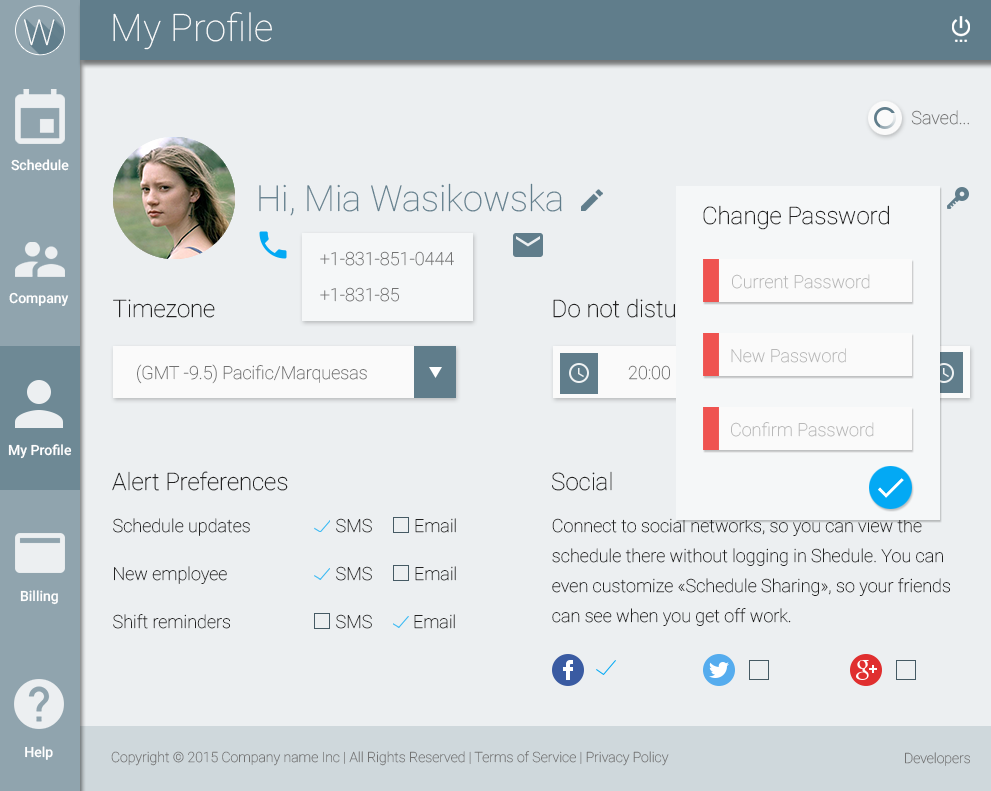
<style>
.page{position:relative;width:991px;height:791px;background:#eceff1}
.page>*{position:absolute;margin:0}
.t1{font:38px "Roboto-Thin";color:#ffffff}
.t2{font:35.7px "Roboto-Thin";color:#ffffff}
.t3{font:18px "Roboto-Thin";color:#727272}
.t4{font:14px "Roboto-Medium";color:#ffffff}
.t5{font:36px "Roboto-Thin";color:#607d8b}
.t6{font:24px "Roboto-Thin";color:#222222}
.t7{font:18px "Roboto-Thin";color:#b8b8b8}
.t8{font:18px/24px "Roboto-Thin";color:#222222}
.t9{font:18px "Roboto-Thin";color:#222222}
.t10{font:18px/30px "Roboto-Thin";color:#222222}
.t11{font:14px "Roboto-Thin";color:#727272}
</style>
<div class="page">
<p class="t1" style="left:113px;top:11px;width:159px;height:39px">My Profile</p>
<p class="t2" style="left:24px;top:19px;width:31px;height:27px">W</p>
<p class="t3" style="left:911px;top:110px;width:58px;height:15px">Saved...</p>
<p class="t4" style="left:11px;top:159px;width:58px;height:12px">Schedule</p>
<p class="t5" style="left:259px;top:183px;width:303px;height:33px">Hi, Mia Wasikowska</p>
<p class="t6" style="left:703px;top:205px;width:186px;height:25px">Change Password</p>
<p class="t3" style="left:320px;top:251px;width:134px;height:15px">+1-831-851-0444</p>
<p class="t7" style="left:732px;top:274px;width:138px;height:15px">Current Password</p>
<p class="t4" style="left:9px;top:292px;width:60px;height:14px">Company</p>
<p class="t3" style="left:320px;top:287px;width:79px;height:15px">+1-831-85</p>
<p class="t6" style="left:113px;top:299px;width:102px;height:19px">Timezone</p>
<p class="t6" style="left:553px;top:298px;width:184px;height:20px">Do not disturb me</p>
<p class="t7" style="left:731px;top:348px;width:115px;height:15px">New Password</p>
<p class="t3" style="left:137px;top:364px;width:230px;height:20px">(GMT -9.5) Pacific/Marquesas</p>
<p class="t3" style="left:628px;top:365px;width:42px;height:15px">20:00</p>
<p class="t7" style="left:731px;top:422px;width:143px;height:15px">Confirm Password</p>
<p class="t4" style="left:8px;top:444px;width:64px;height:15px">My Profile</p>
<p class="t6" style="left:112px;top:471px;width:176px;height:20px">Alert Preferences</p>
<p class="t6" style="left:552px;top:471px;width:60px;height:20px">Social</p>
<p class="t8" style="left:113px;top:518px;width:137px;height:111px">Schedule updates<br><br>New employee<br><br>Shift reminders</p>
<p class="t9" style="left:336px;top:518px;width:36px;height:15px">SMS</p>
<p class="t9" style="left:415px;top:518px;width:41px;height:15px">Email</p>
<p class="t10" style="left:552px;top:518px;width:398px;height:108px">Connect to social networks, so you can view the schedule there without logging in Shedule. You can even customize «Schedule Sharing», so your friends can see when you get off work.</p>
<p class="t9" style="left:336px;top:566px;width:36px;height:15px">SMS</p>
<p class="t9" style="left:415px;top:566px;width:41px;height:15px">Email</p>
<p class="t4" style="left:20px;top:590px;width:38px;height:15px">Billing</p>
<p class="t9" style="left:336px;top:614px;width:36px;height:15px">SMS</p>
<p class="t9" style="left:414px;top:614px;width:41px;height:15px">Email</p>
<p class="t4" style="left:25px;top:746px;width:28px;height:14px">Help</p>
<p class="t11" style="left:111px;top:751px;width:558px;height:15px">Copyright © 2015 Company name Inc | All Rights Reserved | Terms of Service | Privacy Policy</p>
<p class="t11" style="left:905px;top:752px;width:65px;height:14px">Developers</p>
</div>
